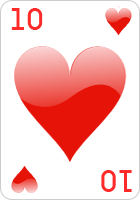
<style>
.page{position:relative;width:140px;height:200px;background:#ffffff}
.page>*{position:absolute;margin:0}
.t1{font:26px "CardCharacters";color:#ff2b2b}
</style>
<div class="page">
<p class="t1" style="left:11px;top:8px;width:32px;height:22px">10</p>
<p class="t1" style="left:101px;top:170px;width:31px;height:22px;rotate:180deg">10</p>
</div>
